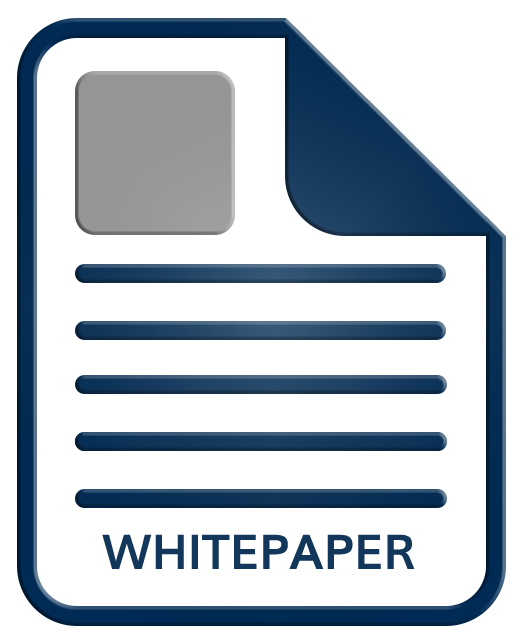
<style>
.page{position:relative;width:521px;height:642px;background:#ffffff}
.page>*{position:absolute;margin:0}
.t1{font:48px "Muli-Bold";color:#12375b}
</style>
<div class="page">
<p class="t1" style="left:102px;top:534px;width:313px;height:35px">WHITEPAPER</p>
</div>
